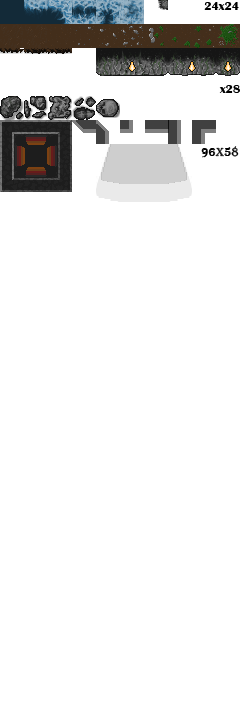
<style>
.page{position:relative;width:240px;height:720px;background:#ffffff}
.page>*{position:absolute;margin:0}
.t1{font:12px "BritannicBold";color:#000000}
.t2{font:12px "Algerian";color:#000000}
</style>
<div class="page">
<p class="t1" style="left:204px;top:2px;width:35px;height:8px">24x24</p>
<p class="t1" style="left:219px;top:85px;width:21px;height:8px">x28</p>
<p class="t2" style="left:201px;top:146px;width:38px;height:12px">96x58</p>
</div>
